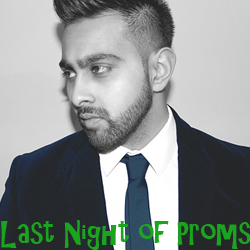
<style>
.page{position:relative;width:250px;height:250px}
.page>*{position:absolute;margin:0}
.t1{font:30px "ARCHRISTY";color:#1ba41e}
</style>
<div class="page">
<p class="t1" style="left:1px;top:220px;width:250px;height:30px">Last Night of Proms</p>
</div>
